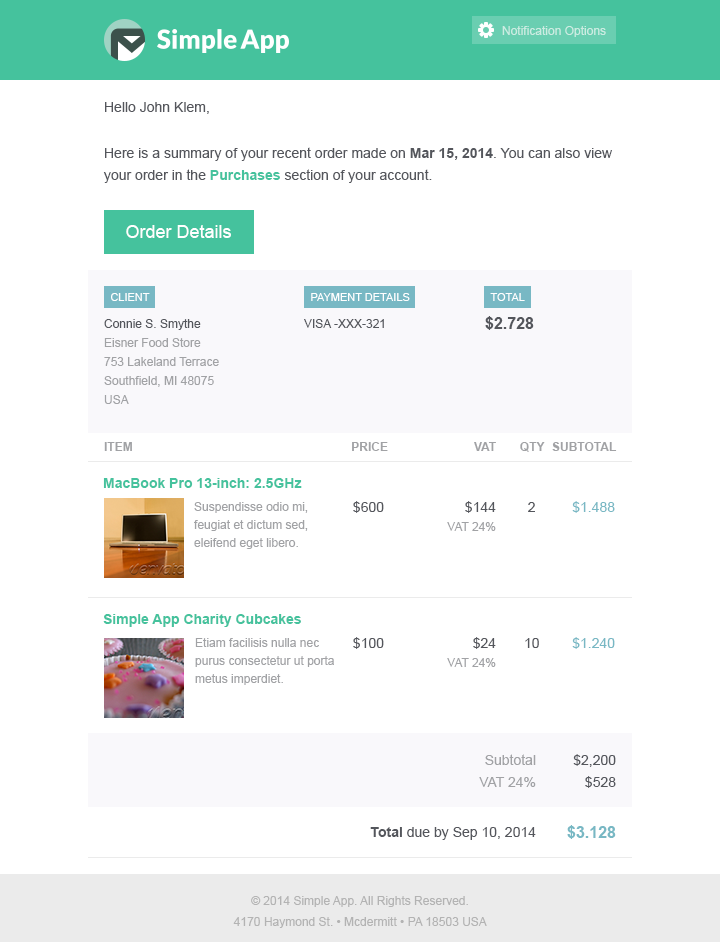
<style>
.page{position:relative;width:720px;height:942px;background:#ffffff}
.page>*{position:absolute;margin:0}
.t1{font:12px "ArialMT";color:#ccece2}
.t2{font:14px/22px "ArialMT";color:#54565c}
.t3{font:14px/22px "Arial-BoldMT";color:#54565c}
.t4{font:14px/22px "Arial-BoldMT";color:#45c29d}
.t5{font:18px "ArialMT";color:#ffffff}
.t6{font:11px "ArialMT";color:#ffffff;text-transform:uppercase}
.t7{font:16px "Arial-BoldMT";color:#54565c}
.t8{font:12px/19px "ArialMT";color:#a1a2a5}
.t9{font:12px/19px "ArialMT";color:#54565c}
.t10{font:12px "ArialMT";color:#54565c}
.t11{font:12px "Arial-BoldMT";color:#a1a2a5;text-transform:uppercase}
.t12{font:14px "Arial-BoldMT";color:#45c29d}
.t13{font:12px/18px "ArialMT";color:#a1a2a5}
.t14{font:14px "ArialMT";color:#54565c}
.t15{font:14px/19px "ArialMT";color:#54565c}
.t16{font:14px "ArialMT";color:#78b8c4}
.t17{font:14px/22px "ArialMT";color:#a1a2a5}
.t18{font:14px "Arial-BoldMT";color:#54565c}
.t19{font:16px "Arial-BoldMT";color:#78b8c4}
.t20{font:12px/21px "ArialMT";color:#b3b3b3}
</style>
<div class="page">
<p class="t1" style="left:502px;top:26px;width:104px;height:11px">Notification Options</p>
<p class="t2" style="left:103px;top:102px;width:509px;height:81px">Hello John Klem,<br><br>Here is a summary of your recent order made on <span class="t3">Mar 15, 2014</span>. You can also view your order in the <span class="t4">Purchases </span>section of your account.</p>
<p class="t5" style="left:126px;top:225px;width:105px;height:13px">Order Details</p>
<p class="t6" style="left:111px;top:293px;width:39px;height:8px">client</p>
<p class="t6" style="left:311px;top:293px;width:99px;height:8px">Payment details</p>
<p class="t6" style="left:490px;top:293px;width:35px;height:8px">Total</p>
<p class="t7" style="left:485px;top:316px;width:49px;height:14px">$2.728</p>
<p class="t8" style="left:104px;top:319px;width:115px;height:85px"><span class="t9">Connie S. Smythe<br></span>Eisner Food Store<br>753 Lakeland Terrace<br>Southfield, MI 48075<br>USA</p>
<p class="t10" style="left:304px;top:319px;width:80px;height:9px">VISA -XXX-321</p>
<p class="t11" style="left:104px;top:442px;width:28px;height:9px">Item</p>
<p class="t11" style="left:352px;top:442px;width:36px;height:9px">Price</p>
<p class="t11" style="left:474px;top:442px;width:22px;height:9px">VAT</p>
<p class="t11" style="left:520px;top:442px;width:25px;height:10px">qty</p>
<p class="t11" style="left:552px;top:442px;width:65px;height:9px">Subtotal</p>
<p class="t12" style="left:103px;top:478px;width:199px;height:10px">MacBook Pro 13-inch: 2.5GHz</p>
<p class="t13" style="left:194px;top:502px;width:114px;height:47px">Suspendisse odio mi, feugiat et dictum sed, eleifend eget libero.</p>
<p class="t14" style="left:353px;top:501px;width:31px;height:12px">$600</p>
<p class="t8" style="left:447px;top:501px;width:49px;height:30px;text-align:right"><span class="t15">$144<br></span>VAT 24%</p>
<p class="t14" style="left:528px;top:502px;width:7px;height:10px">2</p>
<p class="t16" style="left:572px;top:501px;width:43px;height:12px">$1.488</p>
<p class="t12" style="left:103px;top:614px;width:198px;height:13px">Simple App Charity Cubcakes</p>
<p class="t13" style="left:195px;top:638px;width:139px;height:47px">Etiam facilisis nulla nec purus consectetur ut porta metus imperdiet.</p>
<p class="t14" style="left:353px;top:637px;width:31px;height:12px">$100</p>
<p class="t8" style="left:447px;top:637px;width:49px;height:30px;text-align:right"><span class="t15">$24<br></span>VAT 24%</p>
<p class="t14" style="left:525px;top:638px;width:14px;height:10px">10</p>
<p class="t16" style="left:572px;top:637px;width:43px;height:12px">$1.240</p>
<p class="t17" style="left:479px;top:754px;width:57px;height:33px;text-align:right">Subtotal<br>VAT 24%</p>
<p class="t2" style="left:573px;top:754px;width:43px;height:34px;text-align:right">$2,200<br>$528</p>
<p class="t14" style="left:370px;top:827px;width:166px;height:13px"><span class="t18">Total </span>due by Sep 10, 2014</p>
<p class="t19" style="left:567px;top:825px;width:49px;height:14px">$3.128</p>
<p class="t20" style="left:233px;top:896px;width:254px;height:32px;text-align:center">© 2014 Simple App. All Rights Reserved.<br>4170 Haymond St. • Mcdermitt • PA 18503 USA</p>
</div>
